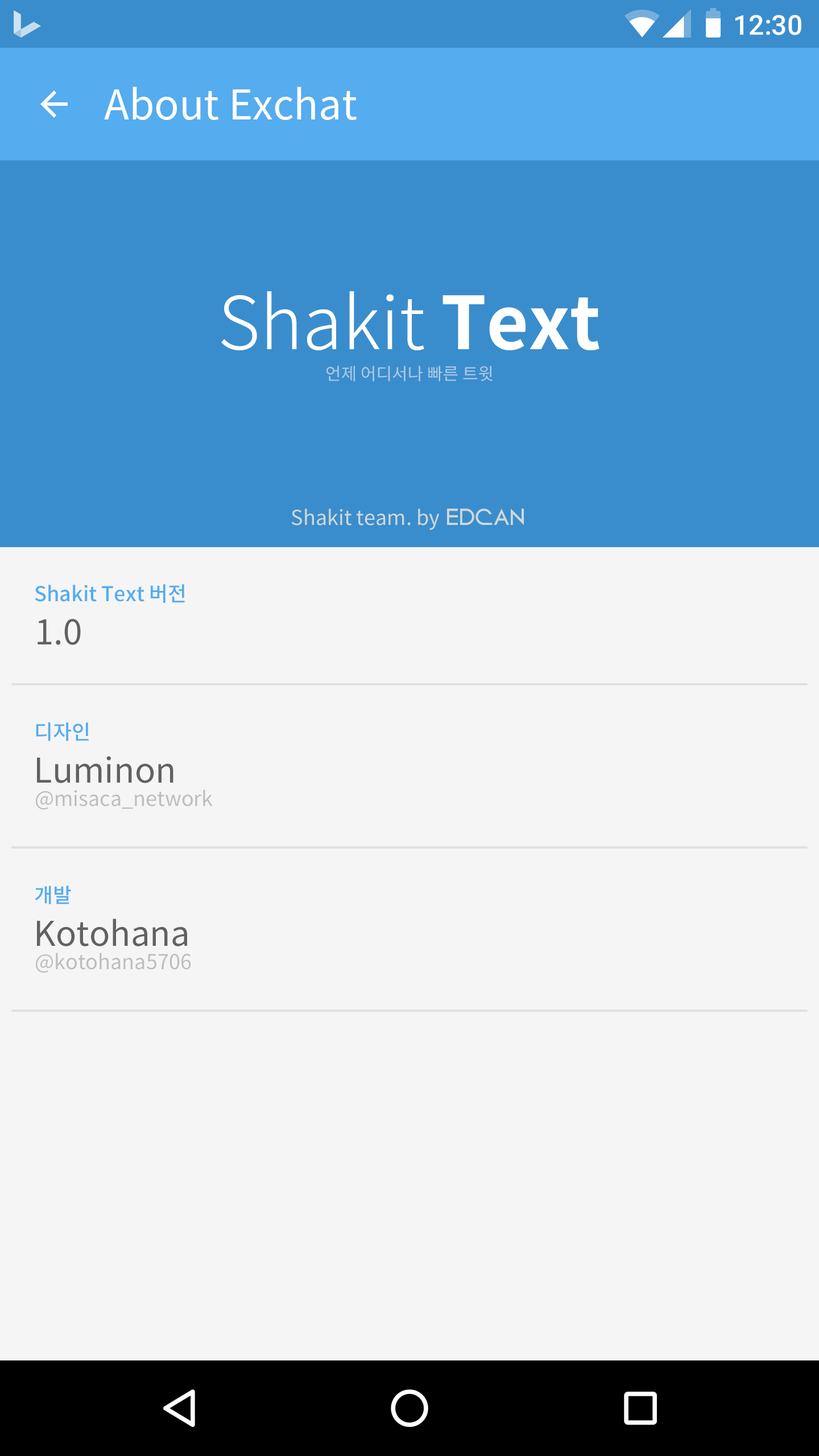
<style>
.page{position:relative;width:819px;height:1456px;background:#f5f5f5}
.page>*{position:absolute;margin:0}
.t1{font:27.3px "Roboto-Medium";color:#ffffff}
.t2{font:40.9px "NotoSansCJKkr-Regular";color:#ffffff}
.t3{font:72.8px "NotoSansCJKkr-Light";color:#ffffff}
.t4{font:72.8px "NotoSansCJKkr-Bold";color:#ffffff}
.t5{font:17.1px "NotoSansCJKkr-Regular";color:#afcbe6}
.t6{font:20.5px "NotoSansCJKkr-Regular";color:#cfd8dc}
.t7{font:17.1px "Circo";color:#cfd8dc}
.t8{font:20.5px "NotoSansCJKkr-Medium";color:#55acee}
.t9{font:34.1px "NotoSansCJKkr-Regular";color:#616161}
.t10{font:20.5px "NotoSansCJKkr-Regular";color:#bdbdbd}
</style>
<div class="page">
<p class="t1" style="left:735px;top:15px;width:66px;height:20px">12:30</p>
<p class="t2" style="left:104px;top:86px;width:253px;height:34px">About Exchat</p>
<p class="t3" style="left:221px;top:291px;width:378px;height:59px">Shakit <span class="t4">Text</span></p>
<p class="t5" style="left:326px;top:366px;width:167px;height:16px">언제 어디서나 빠른 트윗</p>
<p class="t6" style="left:291px;top:508px;width:233px;height:22px">Shakit team. by  <span class="t7">EDCAN</span></p>
<p class="t8" style="left:35px;top:584px;width:150px;height:19px">Shakit Text 버전</p>
<p class="t9" style="left:38px;top:619px;width:43px;height:26px">1.0</p>
<p class="t8" style="left:36px;top:722px;width:53px;height:19px">디자인</p>
<p class="t9" style="left:37px;top:756px;width:136px;height:27px">Luminon</p>
<p class="t10" style="left:36px;top:789px;width:177px;height:21px">@misaca_network</p>
<p class="t8" style="left:35px;top:886px;width:36px;height:18px">개발</p>
<p class="t9" style="left:37px;top:919px;width:150px;height:27px">Kotohana</p>
<p class="t10" style="left:36px;top:953px;width:155px;height:20px">@kotohana5706</p>
</div>
